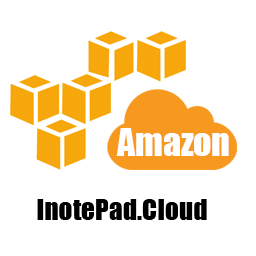
<style>
.page{position:relative;width:256px;height:256px;background:#ffffff}
.page>*{position:absolute;margin:0}
.t1{font:35.7px "Impact";color:#ffffff}
.t2{font:27.5px "Impact";color:#000000}
</style>
<div class="page">
<p class="t1" style="left:116px;top:128px;width:113px;height:28px">Amazon</p>
<p class="t2" style="left:37px;top:199px;width:170px;height:21px">InotePad.Cloud</p>
</div>
